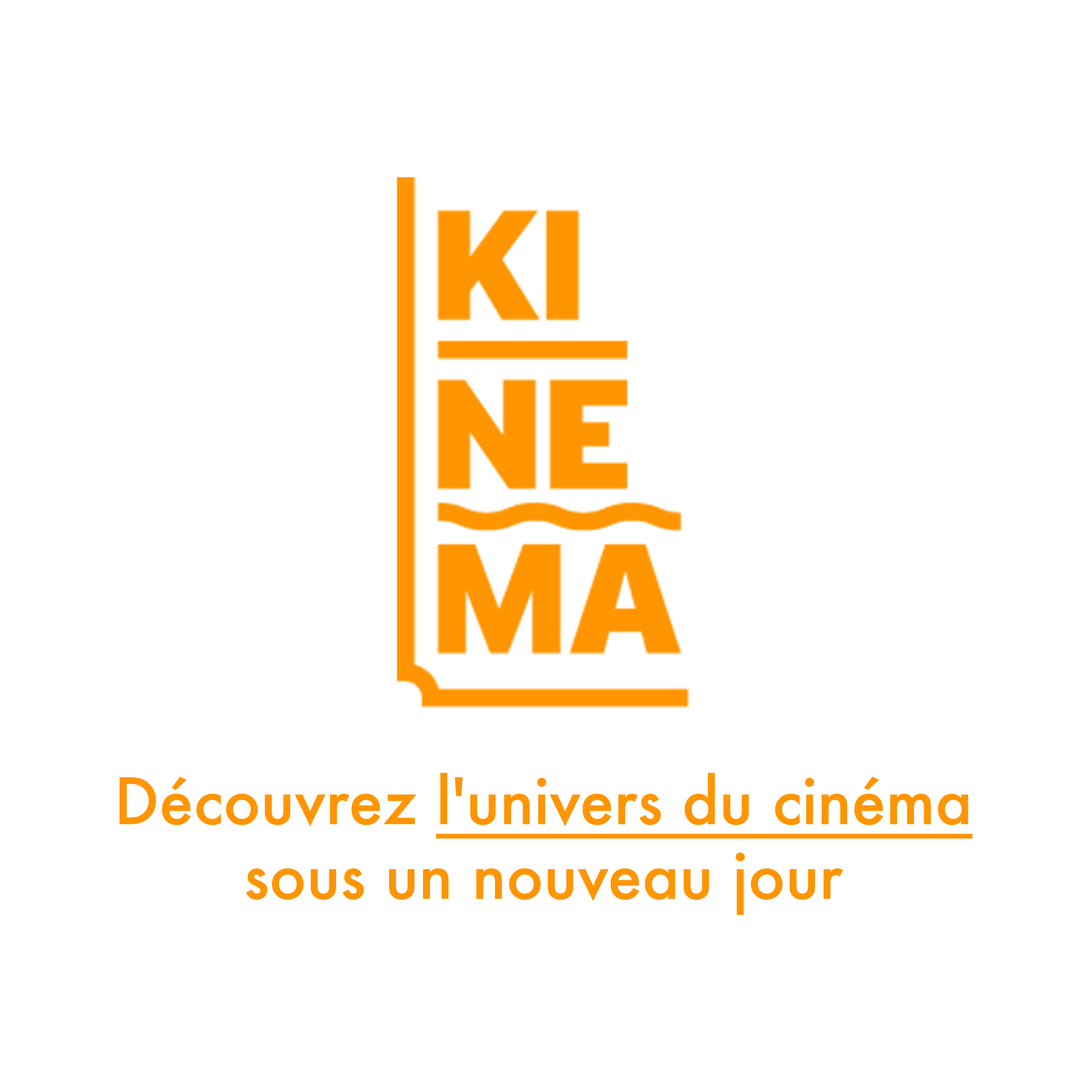
<style>
.page{position:relative;width:1092px;height:1092px;background:#ffffff}
.page>*{position:absolute;margin:0}
.t1{font:62.2px "Futura-Medium";color:#ff9500}
.t2{font:62.2px "Futura-Medium";color:#ff9500;text-decoration:underline}
</style>
<div class="page">
<p class="t1" style="left:120px;top:773px;width:852px;height:142px;text-align:center">Découvrez <span class="t2">l'univers du cinéma<br></span>sous un nouveau jour</p>
</div>
